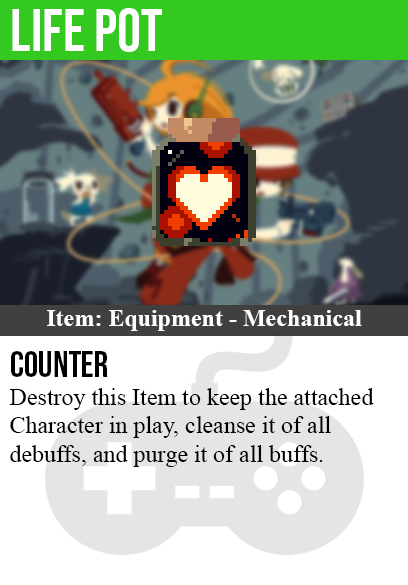
<style>
.page{position:relative;width:408px;height:585px;background:#ffffff}
.page>*{position:absolute;margin:0}
.t1{font:60px "BebasNeue-Regular";color:#ffffff}
.t2{font:24px "TimesNewRomanPS-BoldMT";color:#ffffff}
.t3{font:36px "BebasNeue-Regular";color:#000000}
.t4{font:24px "TimesNewRomanPSMT";color:#000000}
</style>
<div class="page">
<p class="t1" style="left:12px;top:8px;width:150px;height:44px">life pot</p>
<p class="t2" style="left:47px;top:310px;width:315px;height:21px">Item: Equipment - Mechanical</p>
<p class="t3" style="left:11px;top:351px;width:97px;height:26px">counter</p>
<p class="t4" style="left:9px;top:388px;width:365px;height:79px">Destroy this Item to keep the attached<br>Character in play, cleanse it of all<br>debuffs, and purge it of all buffs.</p>
</div>
